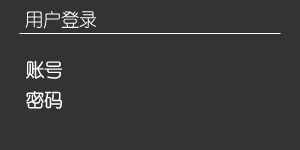
<style>
.page{position:relative;width:300px;height:150px;background:#333333}
.page>*{position:absolute;margin:0}
.t1{font:18px "FZY1JW--GB1-0";color:#ffffff}
.t2{font:18px/30px "FZY1JW--GB1-0";color:#ffffff;font-weight:bold}
</style>
<div class="page">
<p class="t1" style="left:25px;top:11px;width:72px;height:18px">用户登录</p>
<p class="t2" style="left:26px;top:60px;width:37px;height:49px;text-align:right">账号<br>密码</p>
</div>
